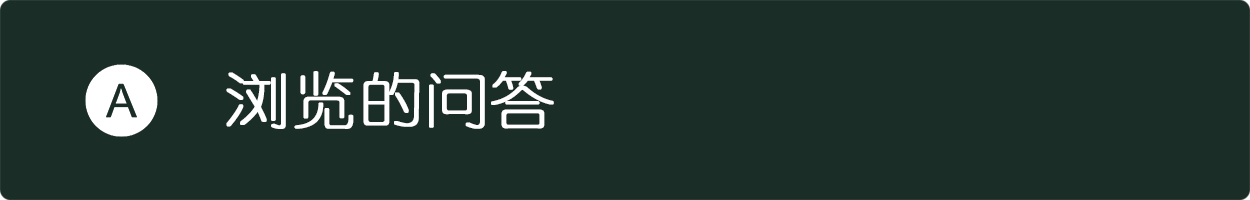
<style>
.page{position:relative;width:1250px;height:200px;background:#1a2d27}
.page>*{position:absolute;margin:0}
.t1{font:60.8px "YouYuan";letter-spacing:0.01em;color:#ffffff;font-weight:bold;scale:1.05 1}
</style>
<div class="page">
<p class="t1" style="left:226px;top:71px;width:328px;height:58px">浏览的问答</p>
</div>
